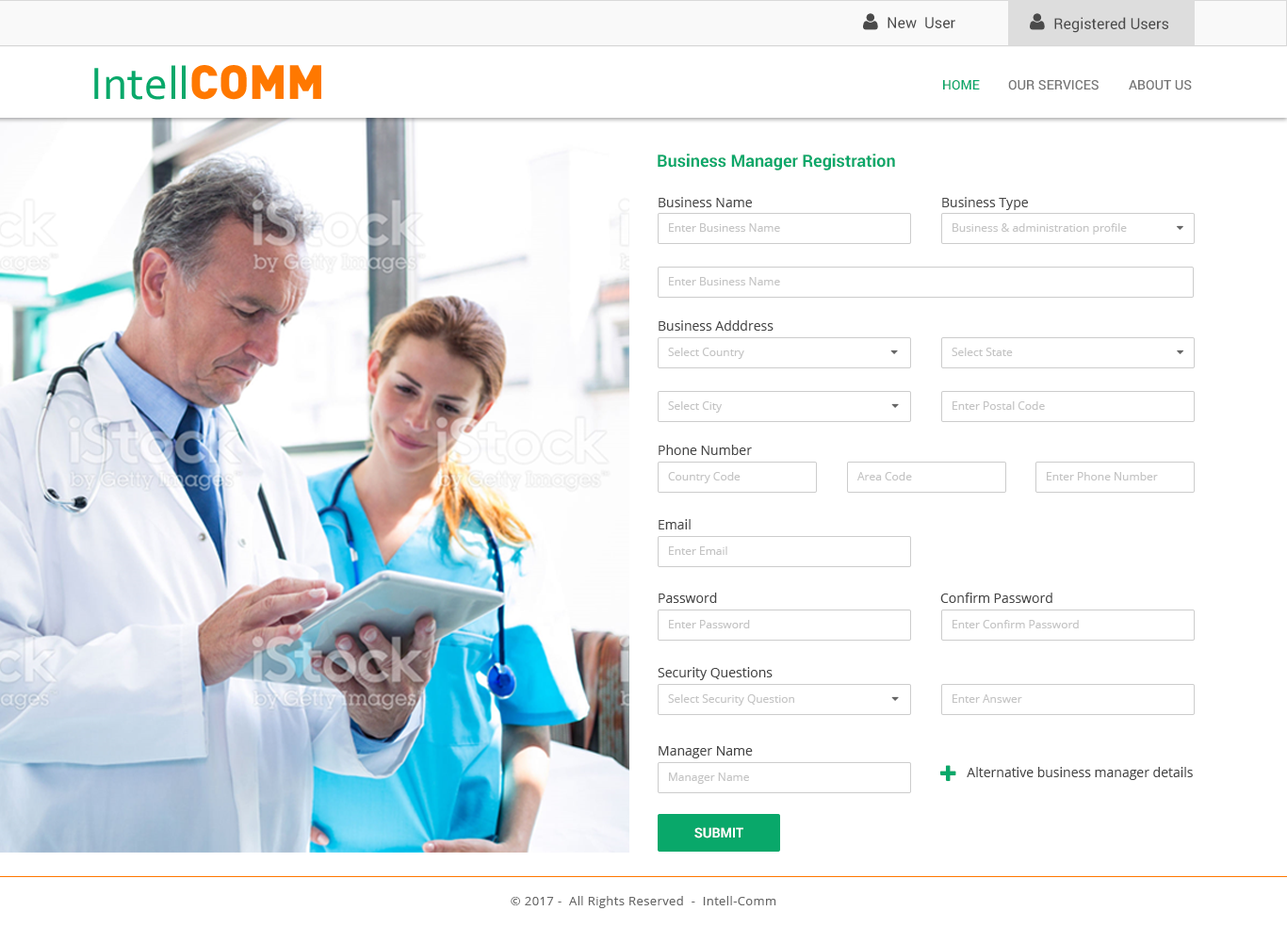
<style>
.page{position:relative;width:1287px;height:927px;background:#ffffff}
.page>*{position:absolute;margin:0}
.t1{font:15.1px "Roboto-Regular";color:#4a4a4a}
.t2{font:47.4px "Corbel";color:#09a86a}
.t3{font:47.4px "DIN-Black";color:#ff7800;text-transform:uppercase}
.t4{font:13.2px "Roboto-Medium";color:#09a86a;text-transform:uppercase}
.t5{font:13.2px "Roboto-Medium";color:#767676;text-transform:uppercase}
.t6{font:17px "Roboto-Bold";color:#09a86a}
.t7{font:13.2px "OpenSans";color:#464646}
.t8{font:11.3px "OpenSans";color:#c4c4c4}
.t9{font:13.4px "Roboto-Bold";color:#ffffff;text-transform:uppercase}
.t10{font:12.2px "OpenSans";letter-spacing:0.03em;color:#666666}
</style>
<div class="page">
<p class="t1" style="left:887px;top:17px;width:68px;height:11px">New  User</p>
<p class="t1" style="left:1054px;top:17px;width:114px;height:16px">Registered Users</p>
<p class="t2" style="left:94px;top:65px;width:227px;height:35px">Intell<span class="t3">Comm</span></p>
<p class="t4" style="left:943px;top:80px;width:37px;height:10px">Home</p>
<p class="t5" style="left:1008px;top:80px;width:90px;height:10px">Our Services</p>
<p class="t5" style="left:1128px;top:80px;width:63px;height:10px">About Us</p>
<p class="t6" style="left:657px;top:154px;width:238px;height:16px">Business Manager Registration</p>
<p class="t7" style="left:658px;top:197px;width:94px;height:10px">Business Name</p>
<p class="t7" style="left:942px;top:197px;width:86px;height:13px">Business Type</p>
<p class="t8" style="left:669px;top:223px;width:111px;height:9px">Enter Business Name</p>
<p class="t8" style="left:669px;top:277px;width:111px;height:8px">Enter Business Name</p>
<p class="t7" style="left:658px;top:320px;width:115px;height:11px">Business Adddress</p>
<p class="t8" style="left:952px;top:401px;width:93px;height:9px">Enter Postal Code</p>
<p class="t7" style="left:658px;top:445px;width:94px;height:10px">Phone Number</p>
<p class="t8" style="left:668px;top:472px;width:72px;height:11px">Country Code</p>
<p class="t8" style="left:857px;top:472px;width:55px;height:8px">Area Code</p>
<p class="t8" style="left:1046px;top:472px;width:112px;height:8px">Enter Phone Number</p>
<p class="t7" style="left:658px;top:519px;width:32px;height:10px">Email</p>
<p class="t8" style="left:669px;top:546px;width:58px;height:9px">Enter Email</p>
<p class="t7" style="left:658px;top:592px;width:59px;height:11px">Password</p>
<p class="t7" style="left:940px;top:592px;width:112px;height:11px">Confirm Password</p>
<p class="t8" style="left:669px;top:620px;width:81px;height:8px">Enter Password</p>
<p class="t8" style="left:952px;top:620px;width:126px;height:8px">Enter Confirm Password</p>
<p class="t7" style="left:657px;top:667px;width:115px;height:13px">Security Questions</p>
<p class="t8" style="left:952px;top:694px;width:70px;height:9px">Enter Answer</p>
<p class="t7" style="left:658px;top:746px;width:95px;height:12px">Manager Name</p>
<p class="t8" style="left:669px;top:772px;width:80px;height:12px">Manager Name</p>
<p class="t9" style="left:694px;top:827px;width:49px;height:11px">Submit</p>
<p class="t10" style="left:510px;top:896px;width:266px;height:12px">© 2017 -  All Rights Reserved  -  Intell-Comm</p>
</div>
